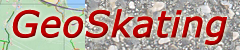
<style>
.page{position:relative;width:240px;height:50px}
.page>*{position:absolute;margin:0}
.t1{font:36px "Verdana-Italic";font-weight:bold}
</style>
<div class="page">
<p class="t1" style="left:12px;top:9px;width:216px;height:36px">GeoSkating</p>
</div>
